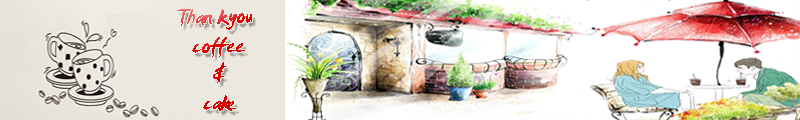
<style>
.page{position:relative;width:800px;height:120px}
.page>*{position:absolute;margin:0}
.t1{font:24px "SmudgerLetPlain"}
</style>
<div class="page">
<p class="t1" style="left:177px;top:9px;width:75px;height:102px;text-align:center;rotate:-1deg">Thank you <br> coffee <br>&amp;<br>cake</p>
</div>
